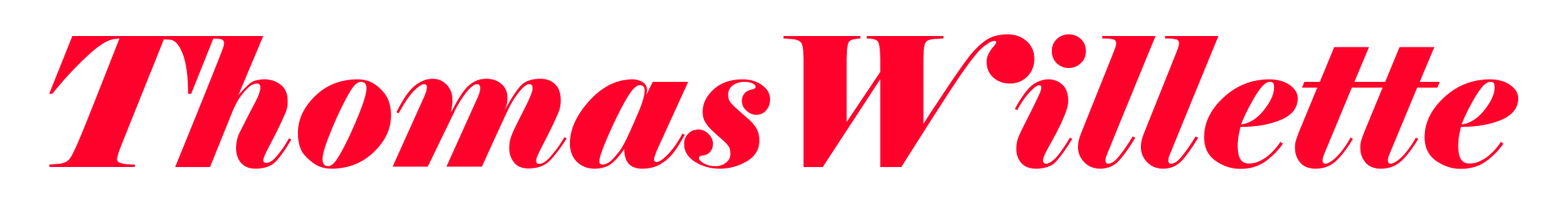
<style>
.page{position:relative;width:1568px;height:203px;background:#ffffff}
.page>*{position:absolute;margin:0}
.t1{font:179.7px "Elephant-Italic";color:#ff022c}
</style>
<div class="page">
<p class="t1" style="left:49px;top:34px;width:1470px;height:135px">ThomasWillette</p>
</div>
